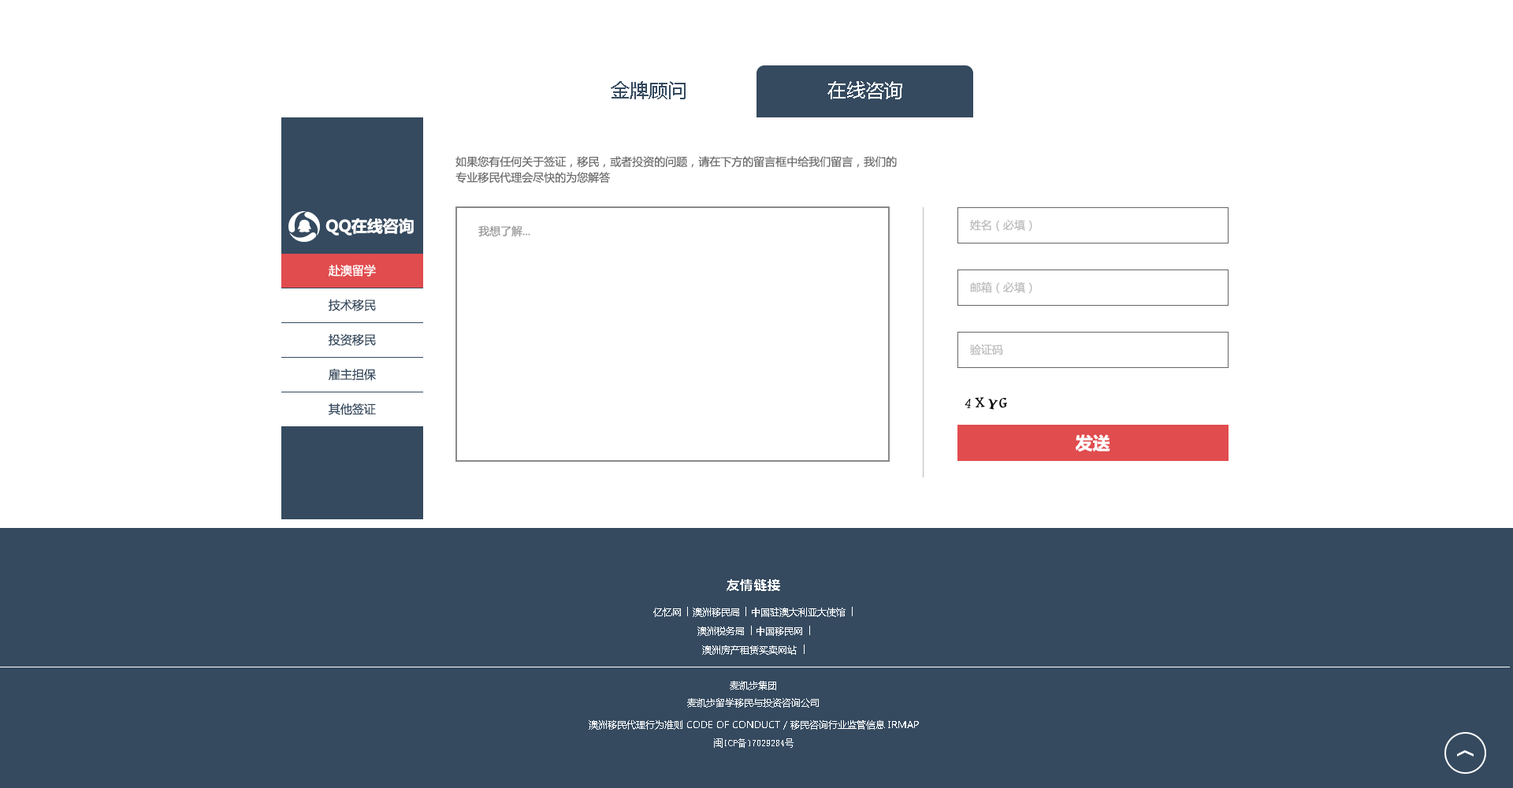
<style>
.page{position:relative;width:1513px;height:788px;background:#ffffff}
.page>*{position:absolute;margin:0}
.t1{font:18.9px "MicrosoftYaHei";color:#354a5f;text-transform:uppercase}
.t2{font:18.9px "MicrosoftYaHei";color:#ffffff;text-transform:uppercase}
.t3{font:11px/15.8px "MicrosoftYaHei";color:#6d6d6d;text-transform:uppercase}
.t4{font:15.8px "MicrosoftYaHei-Bold";color:#ffffff;text-transform:uppercase}
.t5{font:11px "MicrosoftYaHei";color:#bcbcbc;text-transform:uppercase}
.t6{font:11px "MicrosoftYaHei";color:#999999;text-transform:uppercase}
.t7{font:11.8px "MicrosoftYaHei";color:#ffffff;text-transform:uppercase}
.t8{font:11.8px "MicrosoftYaHei";color:#354a5f;text-transform:uppercase}
.t9{font:17.3px "MicrosoftYaHei-Bold";color:#fffefe;text-transform:uppercase}
.t10{font:12.6px "MicrosoftYaHei-Bold";letter-spacing:0.1em;color:#ffffff;text-transform:uppercase}
.t11{font:9.5px "MicrosoftYaHei";color:#ffffff;text-transform:uppercase}
.t12{font:9.5px "SimSun";color:#ffffff;text-transform:uppercase}
</style>
<div class="page">
<p class="t1" style="left:611px;top:81px;width:75px;height:18px">金牌顾问</p>
<p class="t2" style="left:827px;top:81px;width:75px;height:18px">在线咨询</p>
<p class="t3" style="left:456px;top:156px;width:441px;height:28px">如果您有任何关于签证，移民，或者投资的问题，请在下方的留言框中给我们留言，我们的<br>专业移民代理会尽快的为您解答</p>
<p class="t4" style="left:325px;top:218px;width:89px;height:18px">QQ在线咨询</p>
<p class="t5" style="left:970px;top:219px;width:62px;height:13px">姓名（必填）</p>
<p class="t6" style="left:478px;top:225px;width:52px;height:12px">我想了解...</p>
<p class="t7" style="left:329px;top:264px;width:47px;height:13px">赴澳留学</p>
<p class="t5" style="left:970px;top:281px;width:62px;height:13px">邮箱（必填）</p>
<p class="t8" style="left:329px;top:299px;width:47px;height:12px">技术移民</p>
<p class="t8" style="left:329px;top:333px;width:47px;height:13px">投资移民</p>
<p class="t5" style="left:970px;top:344px;width:33px;height:11px">验证码</p>
<p class="t8" style="left:329px;top:368px;width:47px;height:13px">雇主担保</p>
<p class="t8" style="left:329px;top:403px;width:47px;height:12px">其他签证</p>
<p class="t9" style="left:1076px;top:434px;width:34px;height:18px">发送</p>
<p class="t10" style="left:727px;top:579px;width:53px;height:12px">友情链接</p>
<p class="t11" style="left:653px;top:608px;width:28px;height:9px">亿忆网</p>
<p class="t11" style="left:693px;top:608px;width:46px;height:9px">澳洲移民局</p>
<p class="t11" style="left:752px;top:608px;width:94px;height:9px">中国驻澳大利亚大使馆</p>
<p class="t11" style="left:697px;top:627px;width:47px;height:9px">澳洲税务局</p>
<p class="t11" style="left:757px;top:627px;width:45px;height:9px">中国移民网</p>
<p class="t11" style="left:702px;top:645px;width:95px;height:10px">澳洲房产租赁买卖网站</p>
<p class="t11" style="left:730px;top:681px;width:46px;height:9px">麦凯步集团</p>
<p class="t11" style="left:687px;top:698px;width:132px;height:10px">麦凯步留学移民与投资咨询公司</p>
<p class="t11" style="left:589px;top:720px;width:330px;height:10px">澳洲移民代理行为准则 code of conduct / 移民咨询行业监管信息 IRMAP</p>
<p class="t12" style="left:714px;top:738px;width:80px;height:10px">闽ICP备17029284号</p>
</div>
